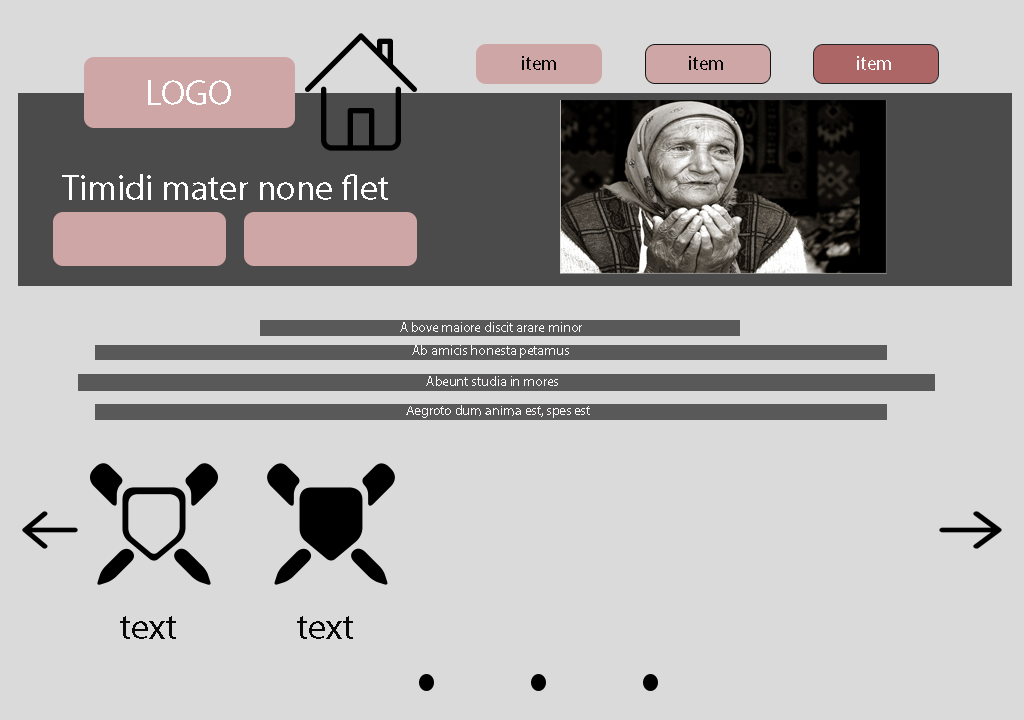
<style>
.page{position:relative;width:1024px;height:720px;background:#dadada}
.page>*{position:absolute;margin:0}
.t1{font:20px "MyriadPro-Regular";color:#070707}
.t2{font:20px "MyriadPro-Regular";color:#fcfafa}
.t3{font:36px "MyriadPro-Regular";color:#ffffff}
.t4{font:14px "MyriadPro-Regular";color:#fcfafa}
.t5{font:36px "MyriadPro-Regular";color:#070707}
</style>
<div class="page">
<p class="t1" style="left:522px;top:56px;width:34px;height:14px">item</p>
<p class="t1" style="left:689px;top:56px;width:34px;height:14px">item</p>
<p class="t2" style="left:857px;top:56px;width:34px;height:14px">item</p>
<p class="t3" style="left:148px;top:80px;width:83px;height:25px">LOGO</p>
<p class="t3" style="left:62px;top:174px;width:326px;height:26px">Timidi mater none flet</p>
<p class="t4" style="left:400px;top:322px;width:182px;height:10px">A bove maiore discit arare minor</p>
<p class="t4" style="left:412px;top:345px;width:157px;height:13px">Ab amicis honesta petamus</p>
<p class="t4" style="left:426px;top:376px;width:132px;height:10px">Abeunt studia in mores</p>
<p class="t4" style="left:406px;top:405px;width:184px;height:13px;rotate:-180deg">Aegroto dum anima est, spes est</p>
<p class="t5" style="left:120px;top:616px;width:56px;height:23px">text</p>
<p class="t5" style="left:297px;top:616px;width:56px;height:23px">text</p>
</div>
